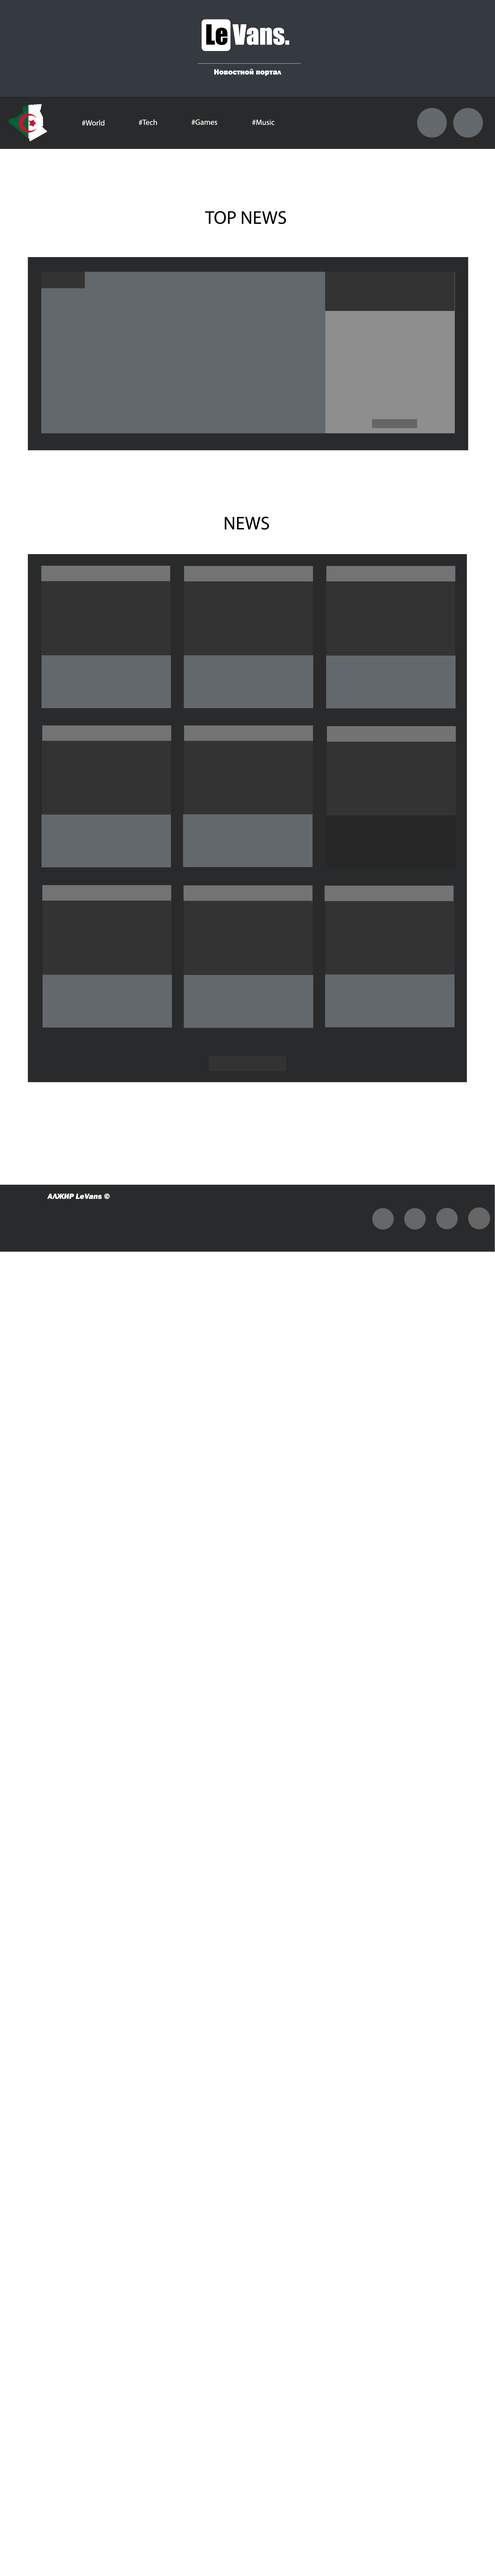
<style>
.page{position:relative;width:495px;height:2576px;background:#ffffff}
.page>*{position:absolute;margin:0}
.t1{font:7.7px "FranklinGothic-Heavy";color:#ffffff}
.t2{font:7.7px "MyriadPro-Regular";color:#ffffff}
.t3{font:18.5px "MyriadPro-Regular";color:#000000}
.t4{font:7.7px "FranklinGothic-HeavyItalic";color:#ffffff}
</style>
<div class="page">
<p class="t1" style="left:214px;top:69px;width:67px;height:7px">Новостной портал</p>
<p class="t2" style="left:82px;top:120px;width:22px;height:6px">#World</p>
<p class="t2" style="left:139px;top:119px;width:18px;height:6px">#Tech</p>
<p class="t2" style="left:191px;top:119px;width:26px;height:6px">#Games</p>
<p class="t2" style="left:252px;top:120px;width:22px;height:5px">#Music</p>
<p class="t3" style="left:205px;top:211px;width:81px;height:13px">TOP NEWS</p>
<p class="t3" style="left:224px;top:516px;width:45px;height:14px">NEWS</p>
<p class="t4" style="left:47px;top:1193px;width:63px;height:6px">АЛЖИР LeVans ©</p>
</div>
